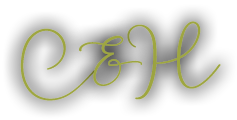
<style>
.page{position:relative;width:237px;height:120px;background:#ffffff}
.page>*{position:absolute;margin:0}
.t1{font:75px "PureLoveRegular";color:#9ea640;font-weight:bold}
.t2{font:75px "LovelyGarden";color:#9ea640;font-weight:bold}
</style>
<div class="page">
<p class="t1" style="left:20px;top:28px;width:75px;height:73px">C</p>
<p class="t1" style="left:127px;top:21px;width:94px;height:79px">H</p>
<p class="t2" style="left:79px;top:35px;width:64px;height:51px">&amp;</p>
</div>
